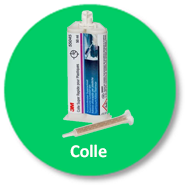
<style>
.page{position:relative;width:185px;height:185px;background:#00cc66}
.page>*{position:absolute;margin:0}
.t1{font:18px "Calibri-Bold";color:#ffffff}
</style>
<div class="page">
<p class="t1" style="left:70px;top:144px;width:37px;height:14px">Colle</p>
</div>
